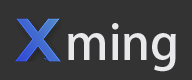
<style>
.page{position:relative;width:192px;height:80px;background:#333333}
.page>*{position:absolute;margin:0}
.t1{font:48px "AdobeHeitiStd-Regular";color:#e9e9ec}
</style>
<div class="page">
<p class="t1" style="left:68px;top:23px;width:108px;height:49px">ming</p>
</div>
